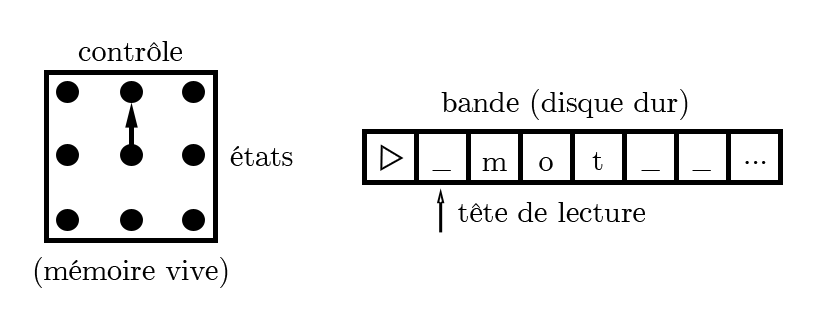
<style>
.page{position:relative;width:834px;height:326px;background:#ffffff}
.page>*{position:absolute;margin:0}
.t1{font:30px "CMUSerif-Roman";color:#000000}
</style>
<div class="page">
<p class="t1" style="left:78px;top:41px;width:104px;height:20px">contrôle</p>
<p class="t1" style="left:441px;top:89px;width:247px;height:31px">bande (disque dur)</p>
<p class="t1" style="left:230px;top:146px;width:63px;height:20px">états</p>
<p class="t1" style="left:482px;top:158px;width:25px;height:13px">m</p>
<p class="t1" style="left:539px;top:157px;width:14px;height:14px">o</p>
<p class="t1" style="left:592px;top:152px;width:11px;height:18px">t</p>
<p class="t1" style="left:745px;top:161px;width:21px;height:3px">...</p>
<p class="t1" style="left:432px;top:170px;width:19px;height:1px">_</p>
<p class="t1" style="left:641px;top:170px;width:19px;height:1px">_</p>
<p class="t1" style="left:692px;top:170px;width:19px;height:1px">_</p>
<p class="t1" style="left:458px;top:202px;width:187px;height:20px">tête de lecture</p>
<p class="t1" style="left:34px;top:257px;width:194px;height:31px">(mémoire vive)</p>
</div>
